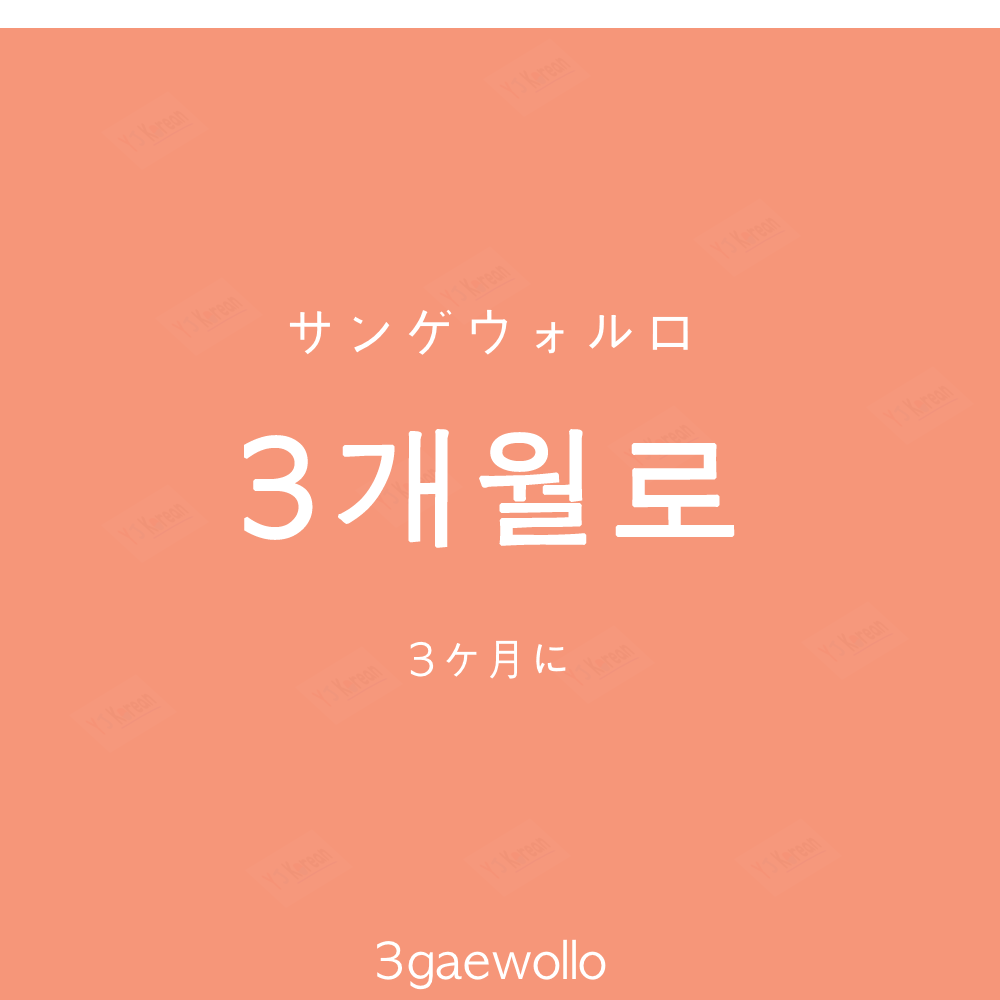
<style>
.page{position:relative;width:1000px;height:1000px;background:#f69679}
.page>*{position:absolute;margin:0}
.t1{font:60px "AppleGothic";color:#ffffff}
.t2{font:130px "AppleGothic";letter-spacing:0.04em;color:#ffffff;font-weight:bold}
.t3{font:45px "AppleGothic";color:#ffffff}
.t4{font:50px "AppleGothic";color:#ffffff}
</style>
<div class="page">
<p class="t1" style="left:289px;top:309px;width:399px;height:46px">サンゲウォルロ</p>
<p class="t2" style="left:244px;top:429px;width:491px;height:119px">3개월로</p>
<p class="t3" style="left:410px;top:640px;width:156px;height:39px">3ヶ月に</p>
<p class="t4" style="left:377px;top:939px;width:229px;height:51px">3gaewollo</p>
</div>
